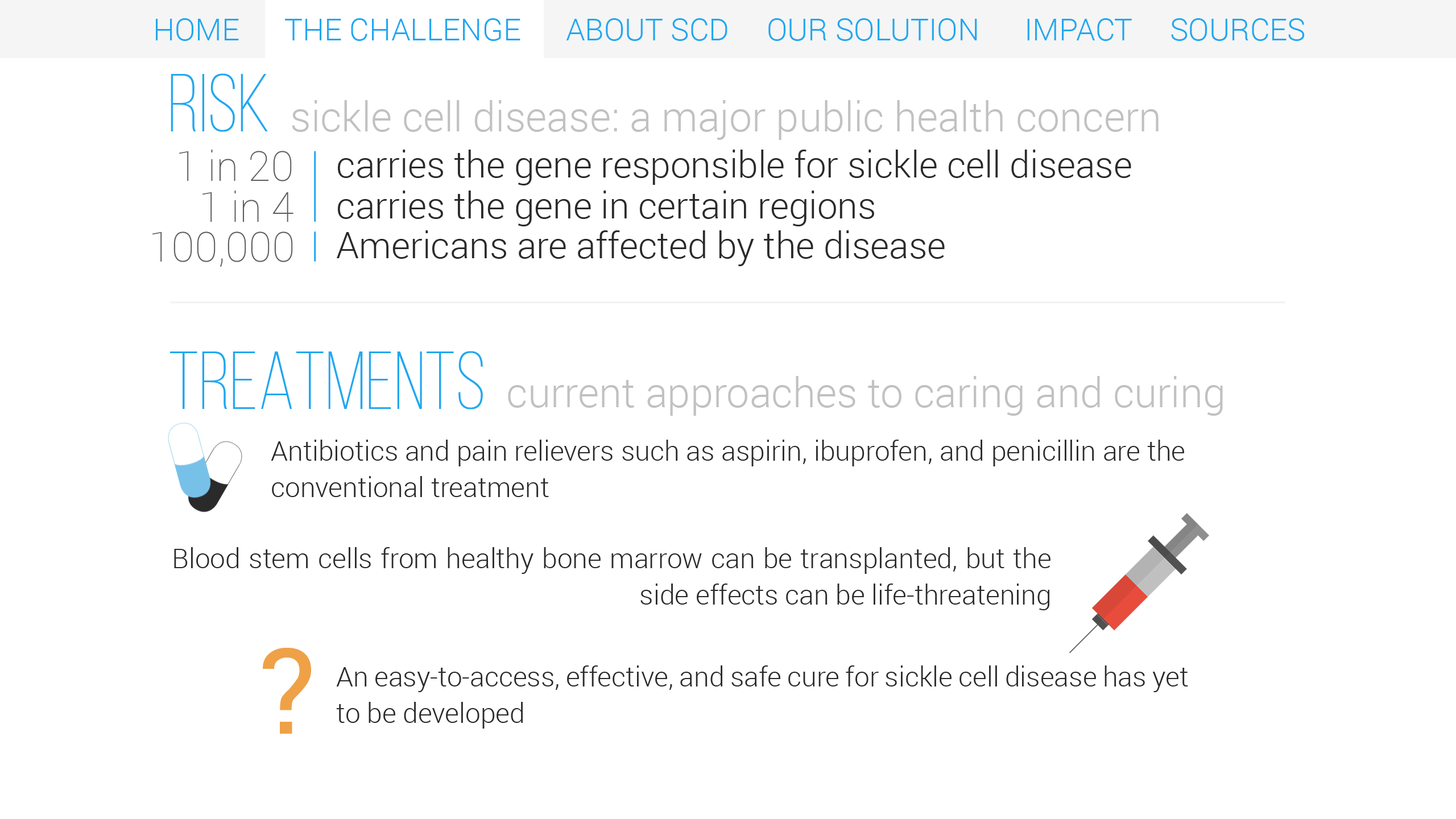
<style>
.page{position:relative;width:1456px;height:819px;background:#ffffff}
.page>*{position:absolute;margin:0}
.t1{font:30.7px "Roboto-Light";color:#22a7f0}
.t2{font:81.9px "BebasNeueLight";color:#22a7f0}
.t3{font:40.9px "Roboto-Light";color:#c1c1c1}
.t4{font:40.9px/40.9px "Roboto-Thin";color:#5e5e5e}
.t5{font:36.4px/40.9px "Roboto-Light";color:#2a2a2a}
.t6{font:40.9px "Roboto-Thin";color:#5e5e5e}
.t7{font:36.4px "Roboto-Light";color:#2a2a2a}
.t8{font:27.3px/36.4px "Roboto-Light";color:#2a2a2a}
.t9{font:119.4px "Roboto-Regular";color:#efa148}
</style>
<div class="page">
<p class="t1" style="left:156px;top:18px;width:1149px;height:23px">HOME      THE CHALLENGE      ABOUT SCD     OUR SOLUTION      IMPACT     SOURCES</p>
<p class="t2" style="left:171px;top:73px;width:97px;height:59px">Risk</p>
<p class="t3" style="left:292px;top:100px;width:867px;height:40px">sickle cell disease: a major public health concern</p>
<p class="t4" style="left:179px;top:150px;width:114px;height:72px;text-align:right">1 in 20<br>1 in 4</p>
<p class="t5" style="left:338px;top:150px;width:793px;height:76px">carries the gene responsible for sickle cell disease<br>carries the gene in certain regions</p>
<p class="t6" style="left:152px;top:231px;width:141px;height:36px">100,000</p>
<p class="t7" style="left:337px;top:230px;width:608px;height:36px">Americans are affected by the disease</p>
<p class="t2" style="left:170px;top:351px;width:313px;height:58px">TREATMENTS</p>
<p class="t3" style="left:508px;top:376px;width:715px;height:40px">current approaches to caring and curing</p>
<p class="t8" style="left:271px;top:440px;width:913px;height:57px">Antibiotics and pain relievers such as aspirin, ibuprofen, and penicillin are the<br>conventional treatment</p>
<p class="t8" style="left:174px;top:547px;width:876px;height:63px;text-align:justify">Blood stem cells from healthy bone marrow can be transplanted, but the side effects can be life-threatening</p>
<p class="t9" style="left:263px;top:648px;width:48px;height:86px">?</p>
<p class="t8" style="left:336px;top:665px;width:852px;height:64px;text-align:justify">An easy-to-access, effective, and safe cure for sickle cell disease has yet to be developed</p>
</div>
